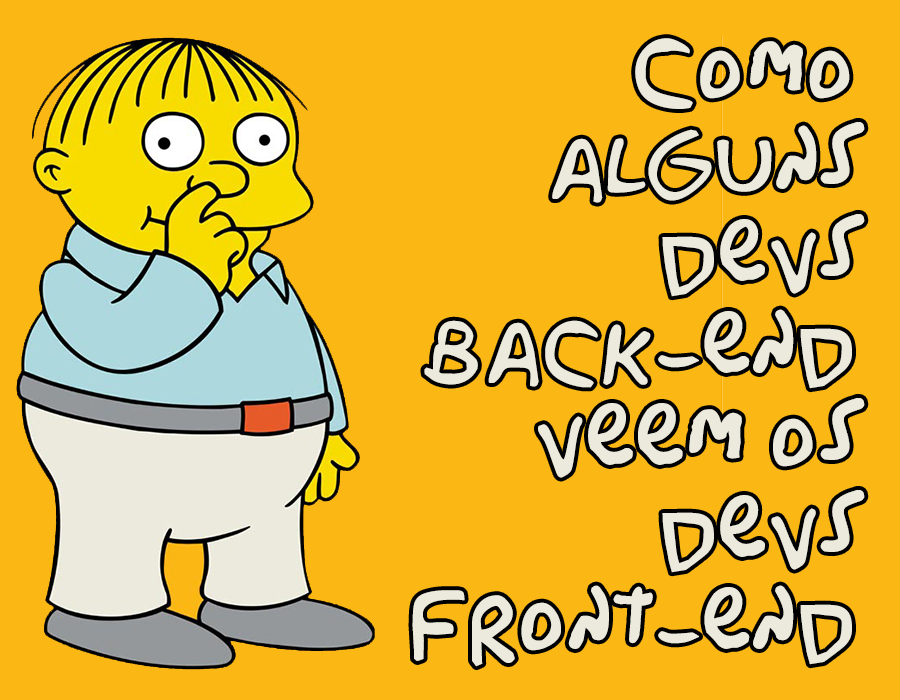
<style>
.page{position:relative;width:900px;height:700px;background:#fbb714}
.page>*{position:absolute;margin:0}
.t1{font:87.9px/92px "Originally-compiled-by-Jon-Bernhardt.";color:#eceadd;font-weight:bold}
</style>
<div class="page">
<p class="t1" style="left:412px;top:38px;width:453px;height:629px;text-align:right">Como<br>alguns<br>devs<br>back-end<br>veem os<br>devs<br>front-end</p>
</div>
